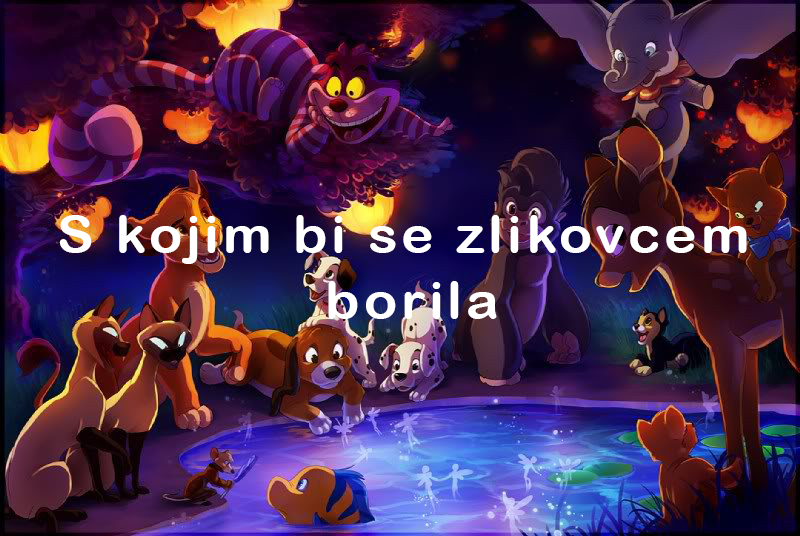
<style>
.page{position:relative;width:800px;height:536px}
.page>*{position:absolute;margin:0}
.t1{font:52.2px "ArialRoundedMTBold";letter-spacing:0.07em;color:#ffffff;scale:1.05 1}
</style>
<div class="page">
<p class="t1" style="left:59px;top:215px;width:688px;height:104px;text-align:center">S kojim bi se zlikovcem <br>borila</p>
</div>
